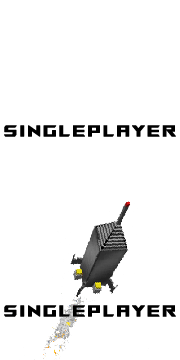
<style>
.page{position:relative;width:180px;height:360px;background:#ffffff}
.page>*{position:absolute;margin:0}
.t1{font:24.6px "ROGFontsv1.6-Regular";letter-spacing:0.08em;color:#000000;font-weight:bold;scale:0.93 1}
</style>
<div class="page">
<p class="t1" style="left:4px;top:125px;width:172px;height:12px">singleplayer</p>
<p class="t1" style="left:4px;top:305px;width:172px;height:12px">singleplayer</p>
</div>
